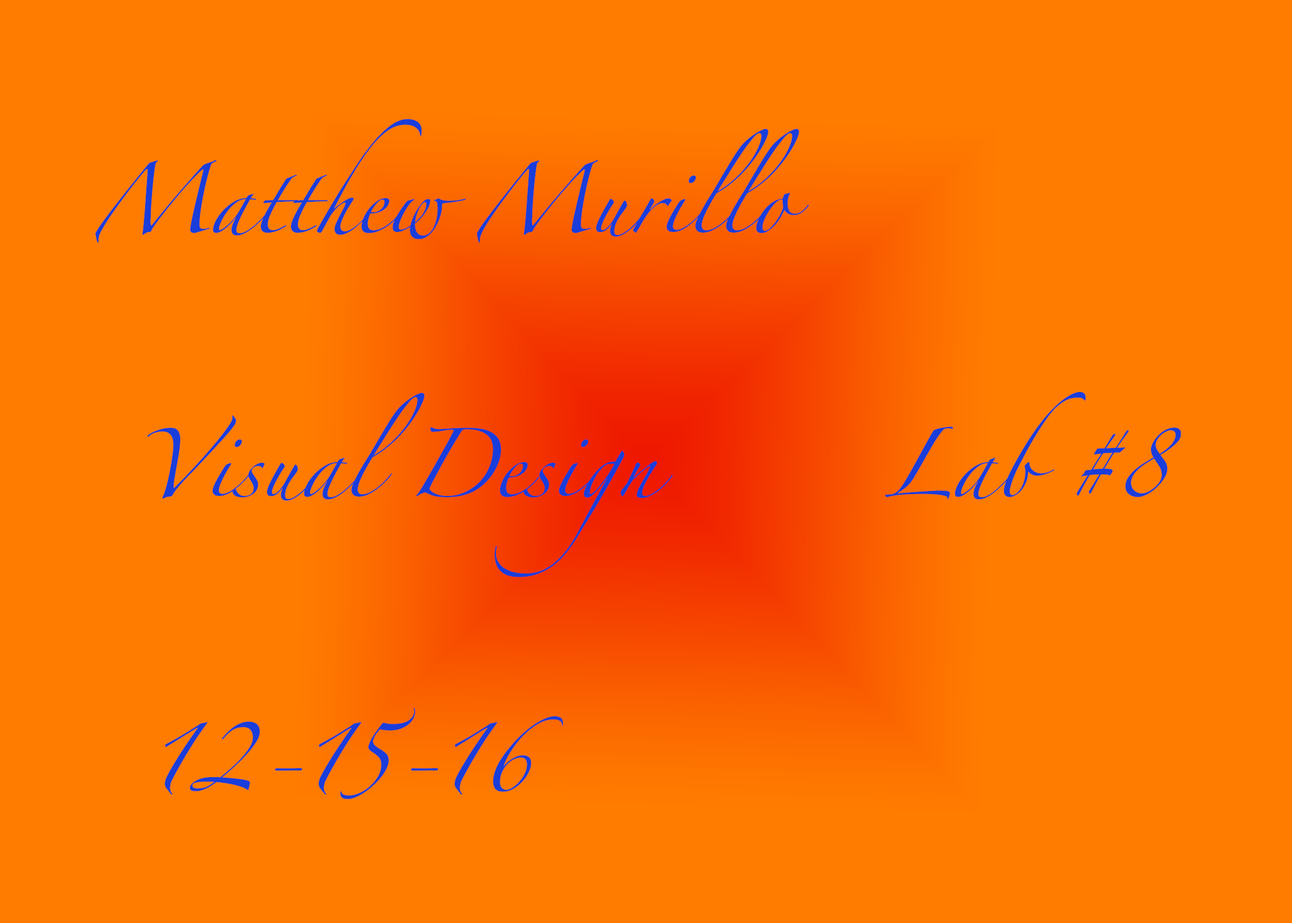
<style>
.page{position:relative;width:1292px;height:923px;background:#ff7c00}
.page>*{position:absolute;margin:0}
.t1{font:61.5px "Zapfino";color:#193dda}
</style>
<div class="page">
<p class="t1" style="left:95px;top:119px;width:714px;height:124px">Matthew Murillo</p>
<p class="t1" style="left:147px;top:393px;width:526px;height:184px">Visual Design</p>
<p class="t1" style="left:885px;top:392px;width:296px;height:108px">Lab #8</p>
<p class="t1" style="left:165px;top:708px;width:398px;height:91px">12-15-16</p>
</div>
